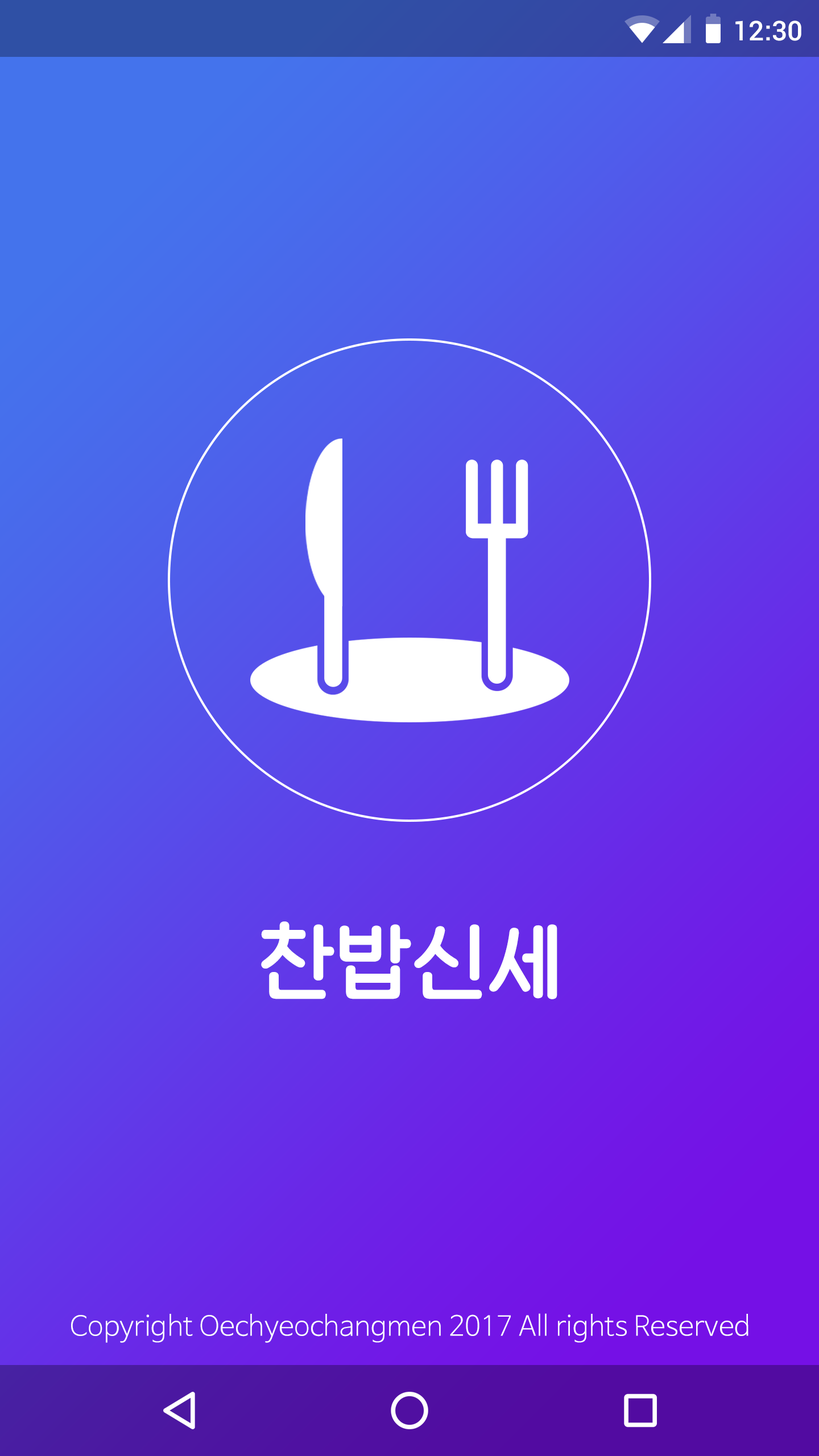
<style>
.page{position:relative;width:819px;height:1456px}
.page>*{position:absolute;margin:0}
.t1{font:27.3px "Roboto-Medium";color:#ffffff}
.t2{font:85.3px "OTNamoogulrimB";color:#ffffff}
.t3{font:27.3px "NanumBarunGothicLight";color:#ffffff}
</style>
<div class="page">
<p class="t1" style="left:735px;top:20px;width:66px;height:21px">12:30</p>
<p class="t2" style="left:261px;top:921px;width:296px;height:78px">찬밥신세</p>
<p class="t3" style="left:71px;top:1313px;width:677px;height:30px">Copyright Oechyeochangmen 2017 All rights Reserved</p>
</div>
